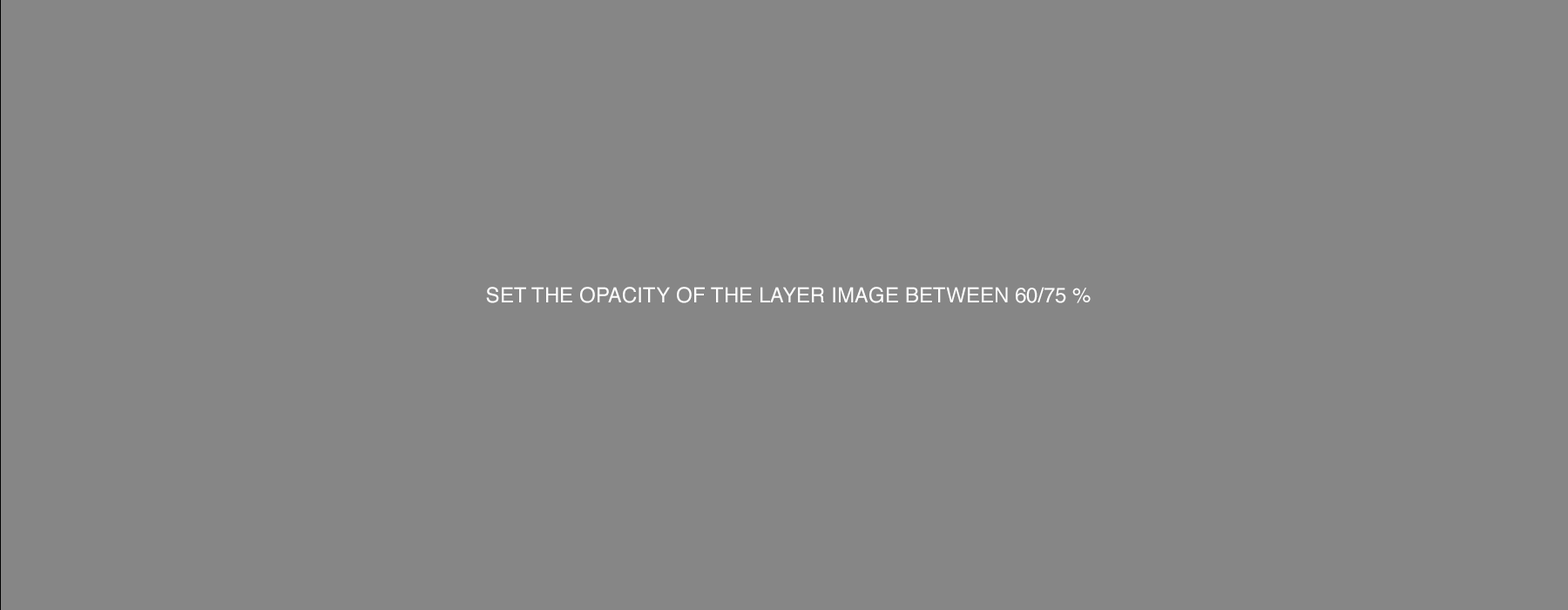
<style>
.page{position:relative;width:1568px;height:610px;background:#868686}
.page>*{position:absolute;margin:0}
.t1{font:20.9px "Helvetica";color:#ffffff}
</style>
<div class="page">
<p class="t1" style="left:486px;top:287px;width:605px;height:16px">SET THE OPACITY OF THE LAYER IMAGE BETWEEN 60/75 %</p>
</div>
